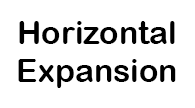
<style>
.page{position:relative;width:195px;height:108px;background:#ffffff}
.page>*{position:absolute;margin:0}
.t1{font:32px "ArialRoundedMTBold";color:#000000}
</style>
<div class="page">
<p class="t1" style="left:18px;top:21px;width:158px;height:67px;text-align:center">Horizontal<br>Expansion</p>
</div>
